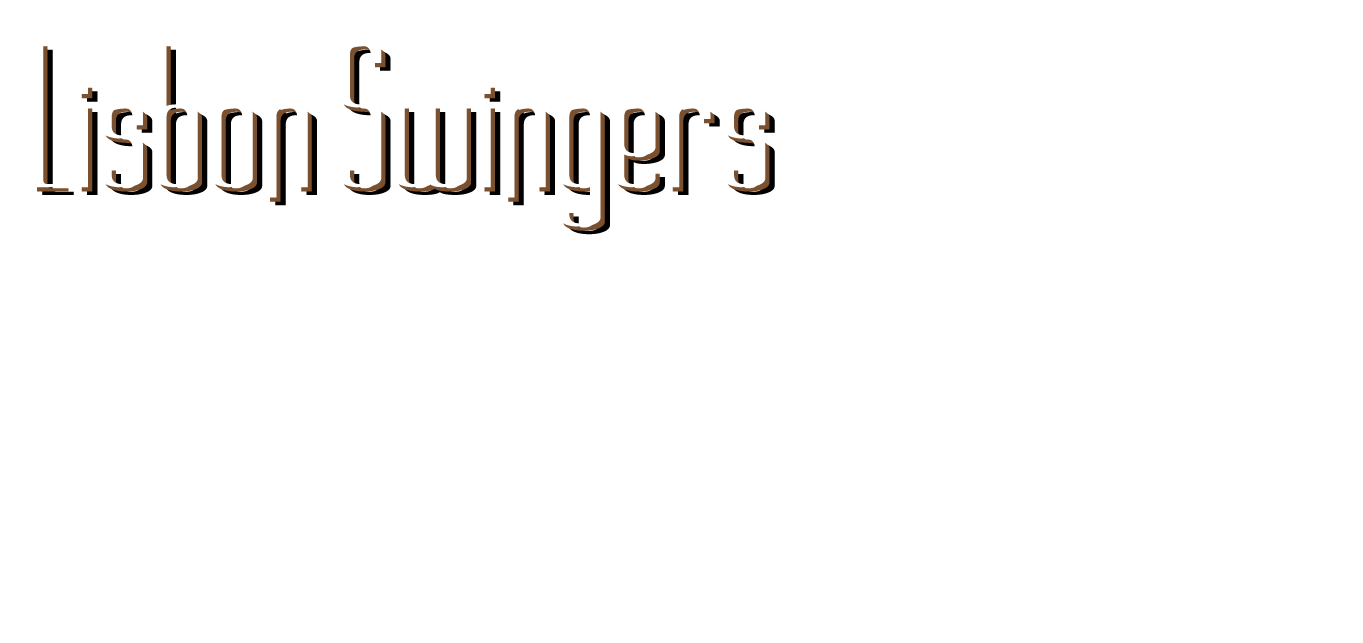
<style>
.page{position:relative;width:1363px;height:643px;background:#ffffff}
.page>*{position:absolute;margin:0}
.t1{font:207.2px "LongCoolMother";letter-spacing:0.025em}
</style>
<div class="page">
<p class="t1" style="left:42px;top:49px;width:733px;height:186px">Lisbon Swingers</p>
</div>
